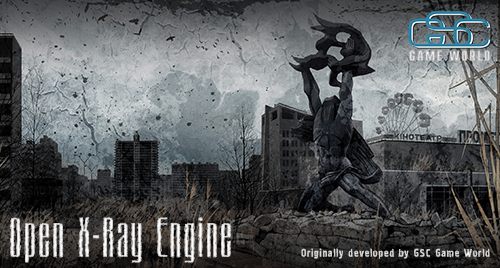
<style>
.page{position:relative;width:500px;height:268px}
.page>*{position:absolute;margin:0}
.t1{font:55.8px "MatterhornCTT";letter-spacing:0.025em}
.t2{font:11.2px "Graffiti1CTT-Regular";letter-spacing:0.05em;color:#d2d2d2}
</style>
<div class="page">
<p class="t1" style="left:10px;top:217px;width:221px;height:46px">Open X-Ray Engine</p>
<p class="t2" style="left:301px;top:248px;width:189px;height:11px">Originally developed by GSC Game World</p>
</div>
